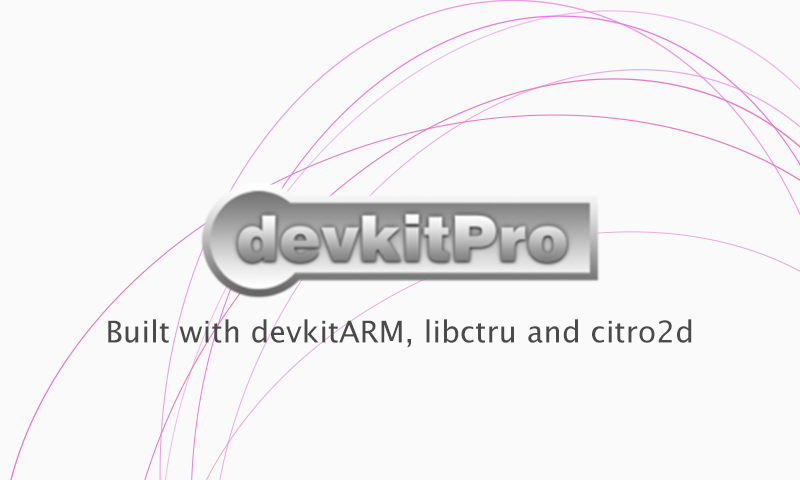
<style>
.page{position:relative;width:800px;height:480px;background:#fafafa}
.page>*{position:absolute;margin:0}
.t1{font:30px "LucidaGrande";color:#4a4a4a}
.t2{font:40px "LucidaGrande";color:#4a4a4a}
</style>
<div class="page">
<p class="t1" style="left:108px;top:319px;width:584px;height:29px"><span class="t2"> <br></span> <br><br>Built with devkitARM, libctru and citro2d</p>
</div>
